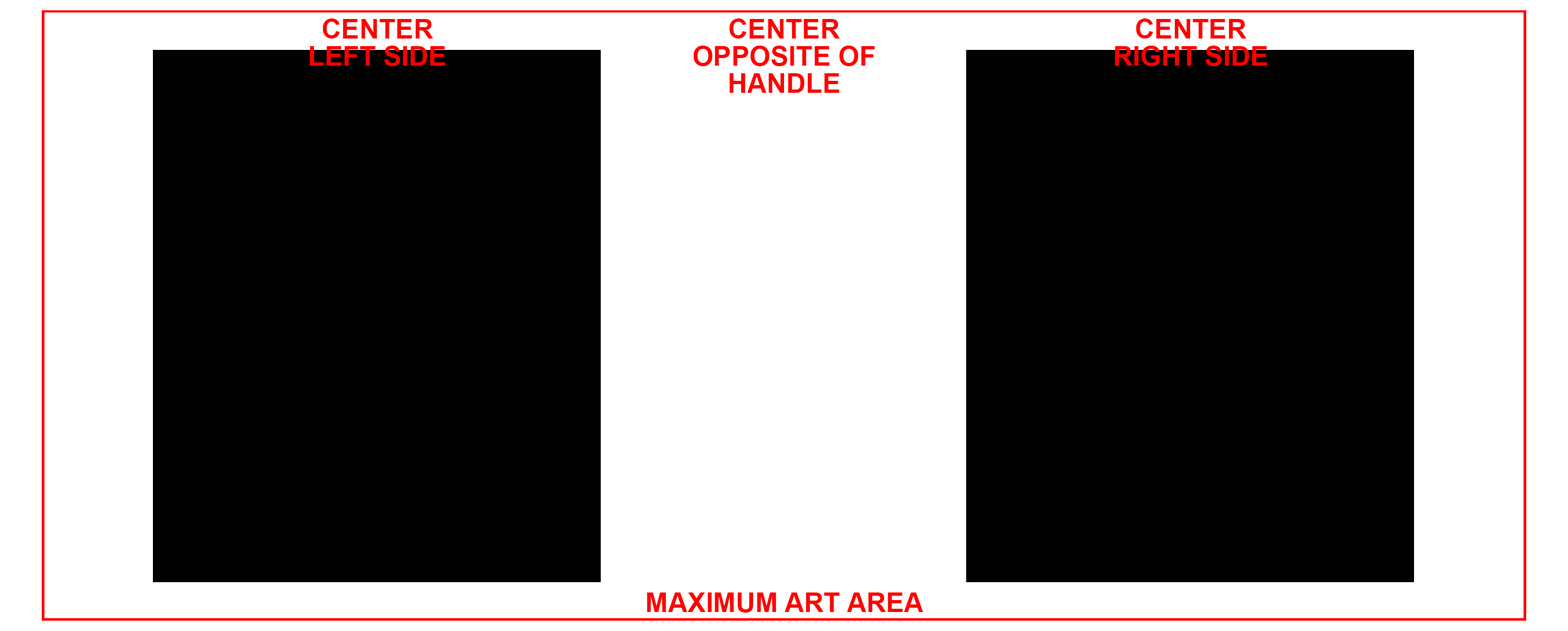
<style>
.page{position:relative;width:1568px;height:631px;background:#000000}
.page>*{position:absolute;margin:0}
.t1{font:27.1px/27.1px "Arial-BoldMT";color:#ff0000}
.t2{font:27.1px "Arial-BoldMT";color:#ff0000}
</style>
<div class="page">
<p class="t1" style="left:310px;top:18px;width:135px;height:48px;text-align:center">CENTER<br>LEFT SIDE</p>
<p class="t1" style="left:693px;top:18px;width:182px;height:75px;text-align:center">CENTER<br>OPPOSITE OF<br>HANDLE</p>
<p class="t1" style="left:1115px;top:18px;width:152px;height:48px;text-align:center">CENTER<br>RIGHT SIDE</p>
<p class="t2" style="left:647px;top:592px;width:276px;height:20px">MAXIMUM ART AREA</p>
</div>
